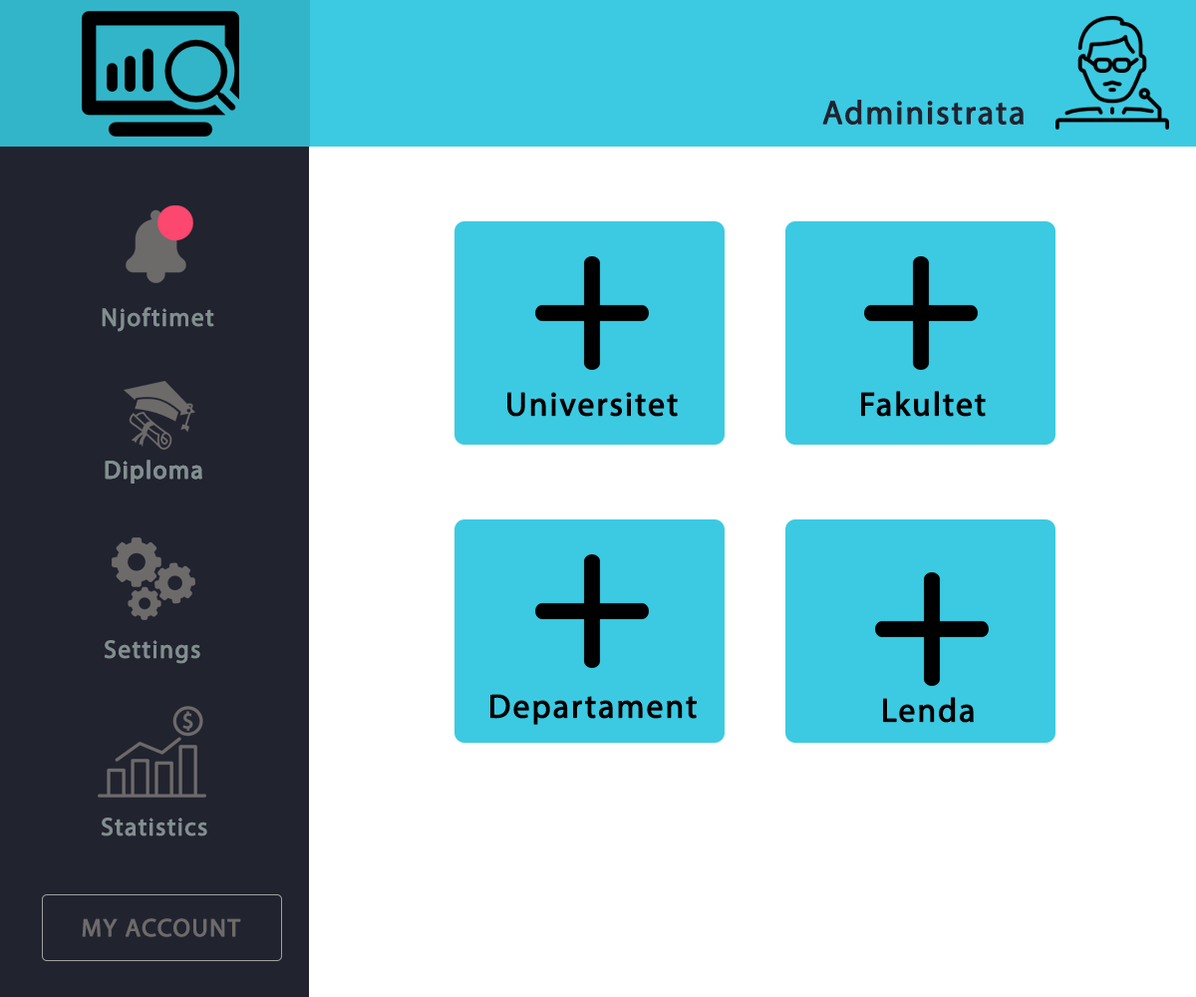
<style>
.page{position:relative;width:1196px;height:997px;background:#ffffff}
.page>*{position:absolute;margin:0}
.t1{font:33.2px "MyriadPro-Regular";letter-spacing:0.04em;color:#21232f;font-weight:bold}
.t2{font:24.9px "MyriadPro-Regular";letter-spacing:0.04em;color:#828e90;font-weight:bold}
.t3{font:33.2px "MyriadPro-Regular";letter-spacing:0.04em;color:#000000;font-weight:bold}
.t4{font:24.9px "MyriadPro-Regular";letter-spacing:0.04em;color:#6d6a6a;font-weight:bold}
</style>
<div class="page">
<p class="t1" style="left:822px;top:100px;width:202px;height:25px">Administrata</p>
<p class="t2" style="left:102px;top:307px;width:112px;height:25px">Njoftimet</p>
<p class="t3" style="left:507px;top:392px;width:171px;height:25px">Universitet</p>
<p class="t3" style="left:861px;top:391px;width:125px;height:26px">Fakultet</p>
<p class="t2" style="left:105px;top:460px;width:97px;height:23px">Diploma</p>
<p class="t2" style="left:105px;top:460px;width:97px;height:23px">Diploma</p>
<p class="t2" style="left:104px;top:640px;width:96px;height:24px">Settings</p>
<p class="t3" style="left:490px;top:694px;width:207px;height:31px">Departament</p>
<p class="t3" style="left:883px;top:697px;width:91px;height:26px">Lenda</p>
<p class="t2" style="left:101px;top:817px;width:106px;height:19px">Statistics</p>
<p class="t4" style="left:82px;top:918px;width:159px;height:19px">MY ACCOUNT</p>
</div>
